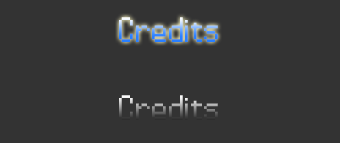
<style>
.page{position:relative;width:340px;height:143px;background:#333333}
.page>*{position:absolute;margin:0}
.t1{font:36px "PowerClear-Regular"}
</style>
<div class="page">
<p class="t1" style="left:119px;top:17px;width:99px;height:25px">Credits</p>
<p class="t1" style="left:119px;top:95px;width:99px;height:25px">Credits</p>
</div>
